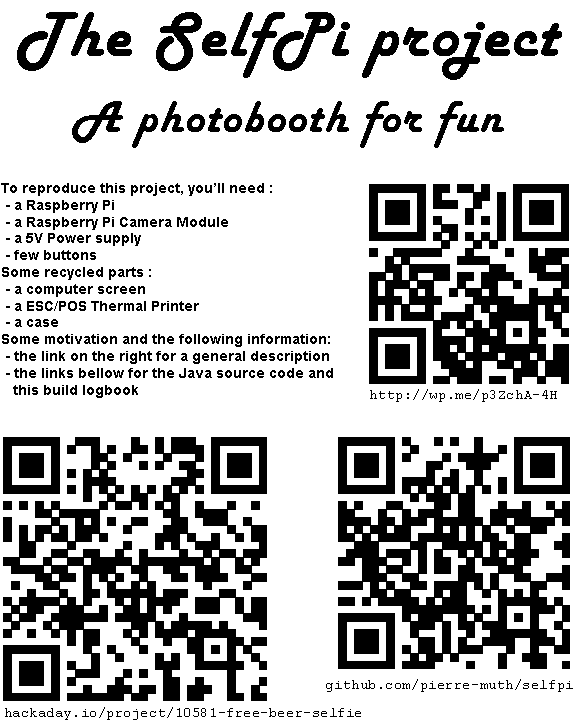
<style>
.page{position:relative;width:576px;height:728px;background:#ffffff}
.page>*{position:absolute;margin:0}
.t1{font:47px/76px "HarlowSolid";letter-spacing:0.04em;color:#000000}
.t2{font:66px/52px "HarlowSolid";letter-spacing:0.04em;color:#000000}
.t3{font:14px "Arial-BoldMT";color:#000000}
.t4{font:14px "CourierNewPSMT";letter-spacing:0.04em;color:#000000}
</style>
<div class="page">
<p class="t1" style="left:17px;top:12px;width:545px;height:136px;text-align:center"><span class="t2">The SelfPi project<br></span>A photobooth for fun</p>
<p class="t3" style="left:1px;top:183px;width:332px;height:215px">To reproduce this project, you’ll need :<br> - a Raspberry Pi<br> - a Raspberry Pi Camera Module<br> - a 5V Power supply<br> - few buttons<br>Some recycled parts :<br> - a computer screen<br> - a ESC/POS Thermal Printer<br> - a case<br>Some motivation and the following information:<br> - the link on the right for a general description<br> - the links bellow for the Java source code and<br>   this build logbook</p>
<p class="t4" style="left:370px;top:389px;width:187px;height:13px">http://wp.me/p3ZchA-4H</p>
<p class="t4" style="left:326px;top:679px;width:247px;height:13px">github.com/pierre-muth/selfpi</p>
<p class="t4" style="left:5px;top:707px;width:356px;height:13px">hackaday.io/project/10581-free-beer-selfie</p>
</div>
